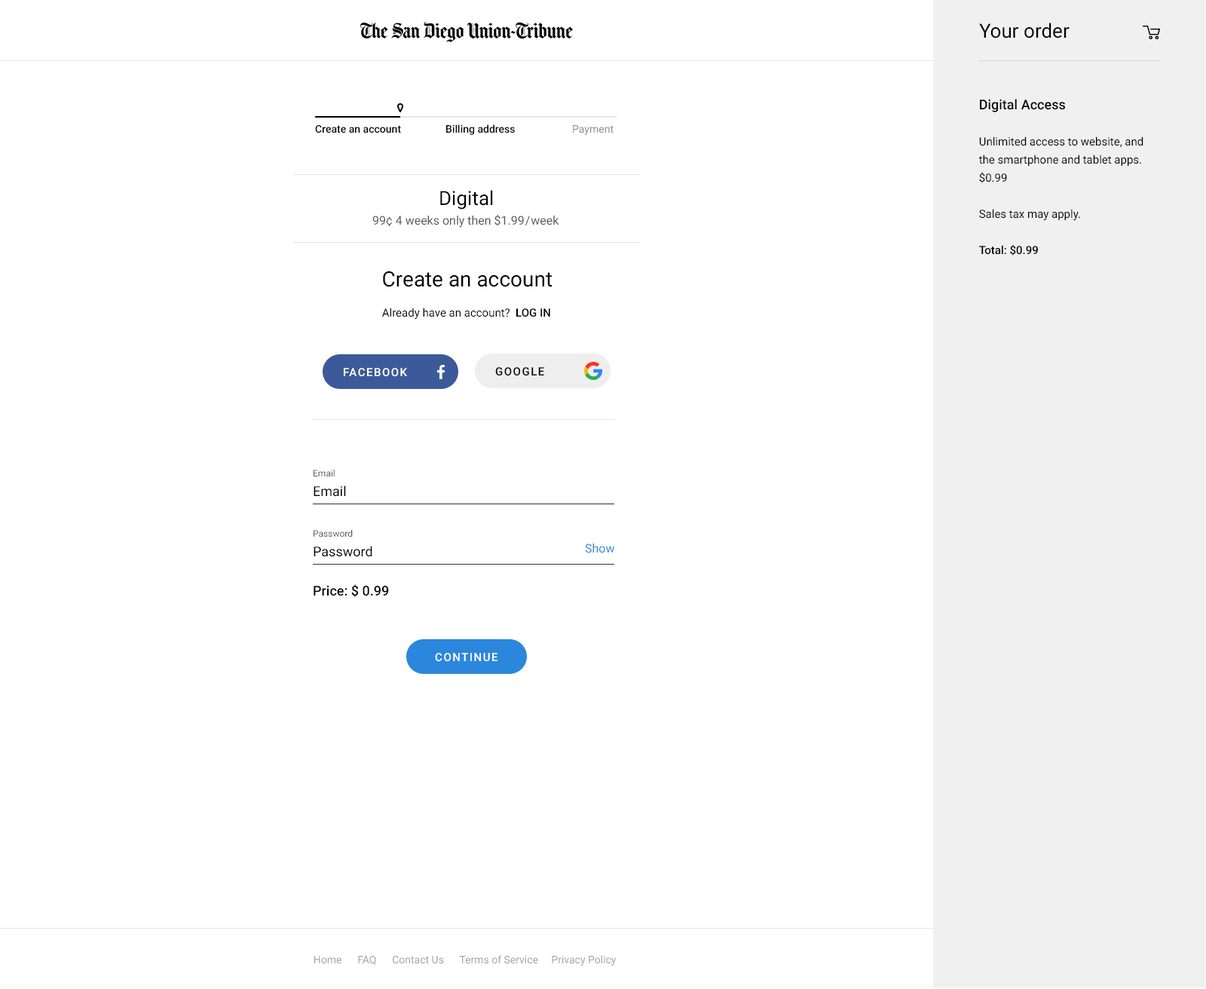
<style>
.page{position:relative;width:1206px;height:989px;background:#ffffff}
.page>*{position:absolute;margin:0}
.t1{font:19.6px "Roboto-Regular";color:#000000}
.t2{font:11.3px/18.1px "Roboto-Regular";color:#000000}
.t3{font:13.6px/18.1px "Roboto-Medium";color:#000000}
.t4{font:11.3px/18.1px "Roboto-Medium";color:#000000}
.t5{font:10.6px "Roboto-Medium";color:#000000}
.t6{font:10.6px "Roboto-Regular";color:#8d8d8d}
.t7{font:12.1px "Roboto-Regular";color:#585858}
.t8{font:21.1px "Roboto-Regular";color:#000000}
.t9{font:11.3px "Roboto-Regular";color:#000000}
.t10{font:11.3px "Roboto-Medium";color:#000000;text-transform:uppercase}
.t11{font:11.3px "Roboto-Medium";letter-spacing:0.1em;color:#ffffff;text-transform:uppercase}
.t12{font:11.3px "Roboto-Medium";letter-spacing:0.1em;color:#000000;text-transform:uppercase}
.t13{font:9px "Roboto-Regular";color:#585858}
.t14{font:13.6px "Roboto-Regular";color:#000000}
.t15{font:12.1px "Roboto-Regular";color:#2b87dc}
.t16{font:13.6px "Roboto-Medium";color:#000000}
.t17{font:10.6px "Roboto-Regular";color:#a3a3a3}
</style>
<div class="page">
<p class="t1" style="left:979px;top:23px;width:90px;height:15px">Your order</p>
<p class="t2" style="left:978px;top:99px;width:165px;height:156px"><span class="t3">Digital Access<br></span><br>Unlimited access to website, and the smartphone and tablet apps.<br>$0.99<br> <br>Sales tax may apply.<br><br><span class="t4">Total: $0.99</span></p>
<p class="t5" style="left:315px;top:125px;width:86px;height:8px">Create an account</p>
<p class="t5" style="left:446px;top:124px;width:69px;height:11px">Billing address</p>
<p class="t6" style="left:573px;top:125px;width:40px;height:10px">Payment</p>
<p class="t1" style="left:440px;top:190px;width:53px;height:20px">Digital</p>
<p class="t7" style="left:372px;top:214px;width:187px;height:14px">99¢ 4 weeks only then $1.99 / week</p>
<p class="t8" style="left:383px;top:271px;width:169px;height:16px">Create an account</p>
<p class="t9" style="left:382px;top:308px;width:168px;height:12px">Already have an account?  <span class="t10">Log in</span></p>
<p class="t11" style="left:344px;top:368px;width:63px;height:9px">Facebook</p>
<p class="t12" style="left:495px;top:367px;width:49px;height:9px">Google</p>
<p class="t13" style="left:314px;top:470px;width:21px;height:6px">Email</p>
<p class="t14" style="left:314px;top:485px;width:32px;height:12px">Email</p>
<p class="t13" style="left:314px;top:530px;width:39px;height:7px">Password</p>
<p class="t14" style="left:314px;top:546px;width:58px;height:11px">Password</p>
<p class="t15" style="left:585px;top:543px;width:30px;height:10px">Show</p>
<p class="t16" style="left:314px;top:584px;width:75px;height:13px">Price: $ 0.99</p>
<p class="t11" style="left:435px;top:653px;width:62px;height:9px">Continue</p>
<p class="t17" style="left:314px;top:955px;width:303px;height:10px">Home      FAQ      Contact Us      Terms of Service     Privacy Policy</p>
</div>
